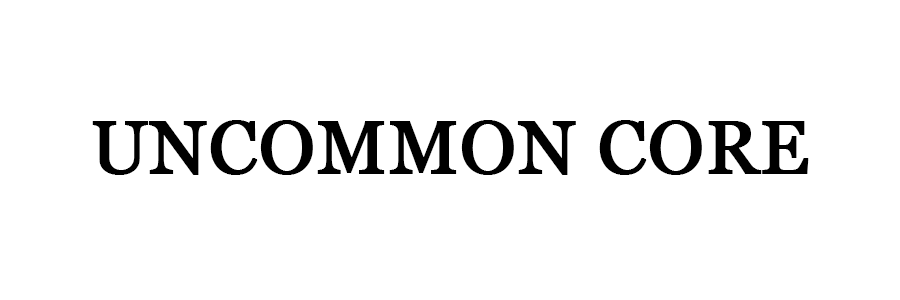
<style>
.page{position:relative;width:900px;height:300px;background:#ffffff}
.page>*{position:absolute;margin:0}
.t1{font:75px "Georgia";color:#000000;font-weight:bold}
</style>
<div class="page">
<p class="t1" style="left:92px;top:120px;width:717px;height:55px">UNCOMMON CORE</p>
</div>
